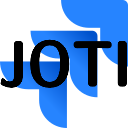
<style>
.page{position:relative;width:128px;height:128px;background:#ffffff}
.page>*{position:absolute;margin:0}
.t1{font:64px "CMUSansSerif-DemiCondensed";color:#000000}
</style>
<div class="page">
<p class="t1" style="left:0px;top:39px;width:128px;height:50px">JOTI</p>
</div>
